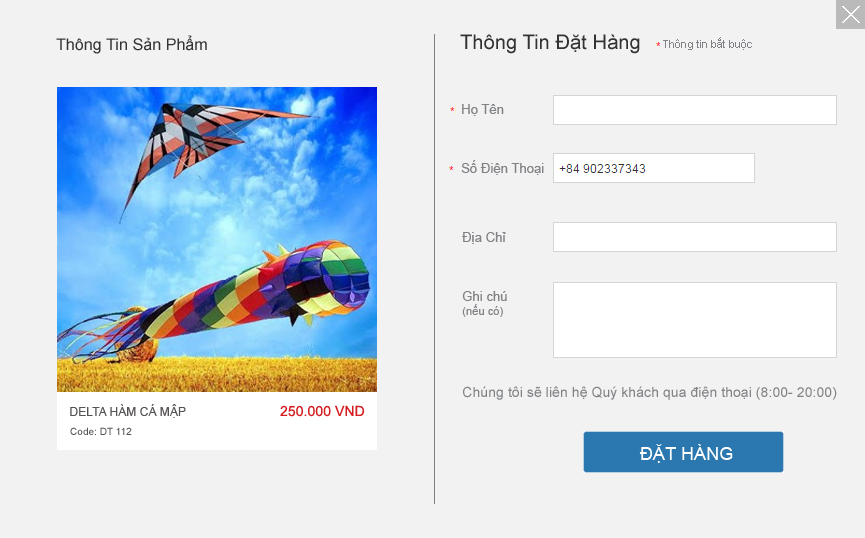
<style>
.page{position:relative;width:865px;height:538px;background:#f2f2f2}
.page>*{position:absolute;margin:0}
.t1{font:16px "ArialMT";letter-spacing:0.005em;color:#333333}
.t2{font:20px "ArialMT";letter-spacing:0.005em;color:#333333}
.t3{font:11px "ArialMT";letter-spacing:0.005em;color:#808285}
.t4{font:13px "ArialMT";letter-spacing:0.005em;color:#808285}
.t5{font:11px/14px "ArialMT";letter-spacing:0.005em;color:#808285}
.t6{font:13px/14px "ArialMT";letter-spacing:0.005em;color:#808285}
.t7{font:14px "ArialMT";letter-spacing:0.005em;color:#808285}
.t8{font:12px "ArialMT";letter-spacing:0.005em;color:#555252}
.t9{font:14px "ArialMT";letter-spacing:0.005em;color:#d41d21}
.t10{font:10px "ArialMT";letter-spacing:0.005em;color:#555252}
.t11{font:18px "ArialMT";letter-spacing:0.005em;color:#ffffff}
</style>
<div class="page">
<p class="t1" style="left:56px;top:35px;width:151px;height:19px">Thông Tin Sản Phẩm</p>
<p class="t2" style="left:460px;top:34px;width:180px;height:20px">Thông Tin Đặt Hàng</p>
<p class="t3" style="left:663px;top:37px;width:89px;height:13px">Thông tin bắt buộc</p>
<p class="t4" style="left:462px;top:104px;width:42px;height:12px">Họ Tên</p>
<p class="t4" style="left:461px;top:160px;width:83px;height:15px">Số Điện Thoại</p>
<p class="t4" style="left:462px;top:232px;width:44px;height:12px">Địa Chỉ</p>
<p class="t5" style="left:462px;top:291px;width:45px;height:26px"><span class="t6">Ghi chú<br></span>(nếu có)</p>
<p class="t7" style="left:463px;top:386px;width:374px;height:14px">Chúng tôi sẽ liên hệ Quý khách qua điện thoại (8:00- 20:00)</p>
<p class="t8" style="left:70px;top:404px;width:116px;height:14px">DELTA HÀM CÁ MẬP</p>
<p class="t9" style="left:280px;top:405px;width:85px;height:12px">250.000 VND</p>
<p class="t10" style="left:70px;top:427px;width:62px;height:8px">Code: DT 112</p>
<p class="t11" style="left:639px;top:444px;width:94px;height:19px">ĐẶT HÀNG</p>
</div>
